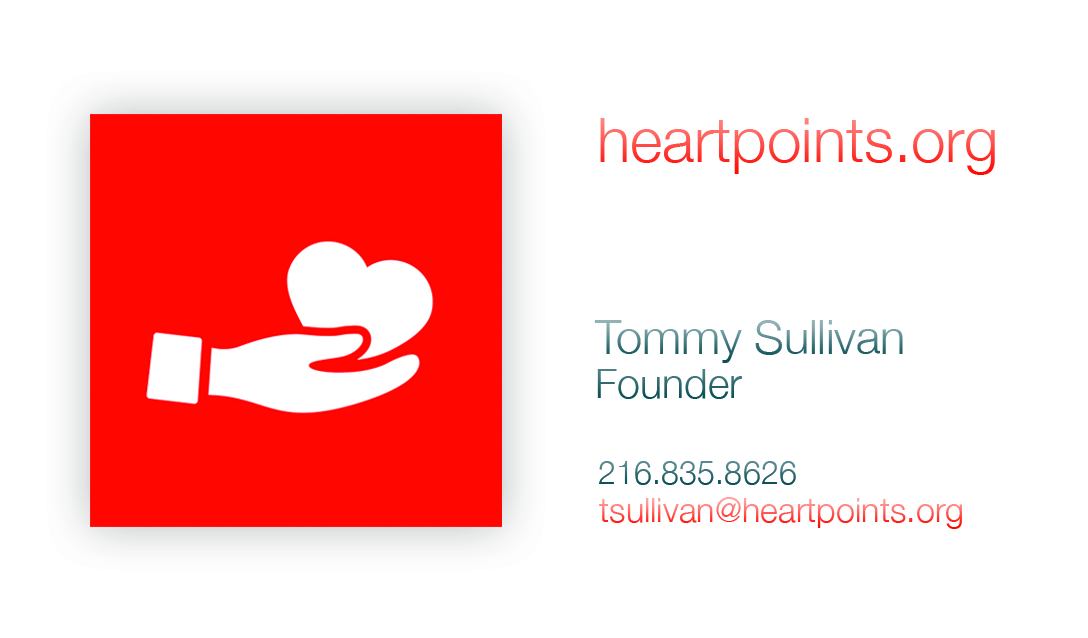
<style>
.page{position:relative;width:1088px;height:638px;background:#ffffff}
.page>*{position:absolute;margin:0}
.t1{font:61.7px "HelveticaNeue-Light"}
.t2{font:46.7px "HelveticaNeue-Light"}
.t3{font:41.1px "HelveticaNeue-Light"}
.t4{font:32.5px "HelveticaNeue-Light"}
.t5{font:34.2px "HelveticaNeue-Light"}
</style>
<div class="page">
<p class="t1" style="left:600px;top:118px;width:395px;height:57px">heartpoints.org</p>
<p class="t2" style="left:594px;top:320px;width:309px;height:43px">Tommy Sullivan</p>
<p class="t3" style="left:597px;top:369px;width:145px;height:30px">Founder</p>
<p class="t4" style="left:599px;top:461px;width:197px;height:24px">216.835.8626</p>
<p class="t5" style="left:599px;top:497px;width:363px;height:32px">tsullivan@heartpoints.org</p>
</div>
